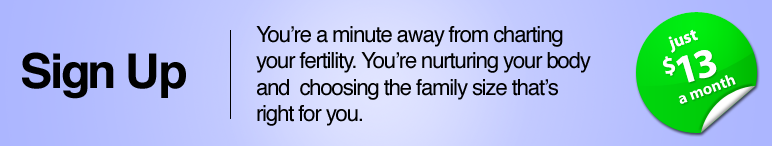
<style>
.page{position:relative;width:772px;height:146px}
.page>*{position:absolute;margin:0}
.t1{font:22px "Helvetica";letter-spacing:-0.05em;color:#000000}
.t2{font:17.2px "MyriadPro-Bold";color:#ffffff}
.t3{font:48px "Helvetica-Bold";letter-spacing:-0.05em;color:#000000}
.t4{font:41.2px "MyriadPro-Bold";letter-spacing:-0.075em;color:#ffffff}
.t5{font:16.2px "MyriadPro-Bold";color:#ffffff}
</style>
<div class="page">
<p class="t1" style="left:256px;top:26px;width:335px;height:100px">You’re a minute away from charting <br>your fertility. You’re nurturing your body<br>and  choosing the family size that’s <br>right for you.</p>
<p class="t2" style="left:668px;top:29px;width:30px;height:24px;rotate:-20deg">just</p>
<p class="t3" style="left:22px;top:52px;width:164px;height:47px">Sign Up</p>
<p class="t4" style="left:663px;top:50px;width:54px;height:33px;rotate:-16deg">$13</p>
<p class="t5" style="left:678px;top:75px;width:58px;height:29px;rotate:-20deg">a month</p>
</div>
